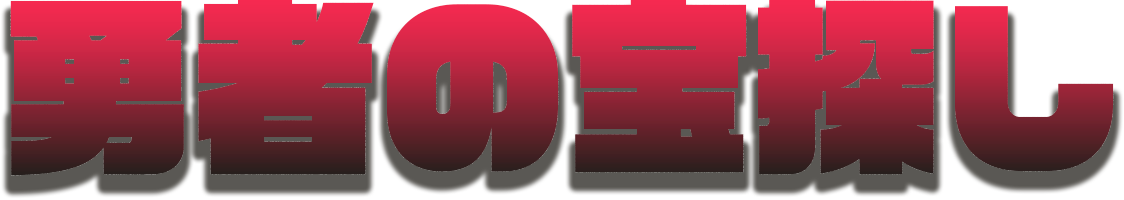
<style>
.page{position:relative;width:1124px;height:200px}
.page>*{position:absolute;margin:0}
.t1{font:187.2px "VDL-LogoJrBlack-Black"}
</style>
<div class="page">
<p class="t1" style="left:10px;top:0px;width:1104px;height:176px">勇者の宝探し</p>
</div>
